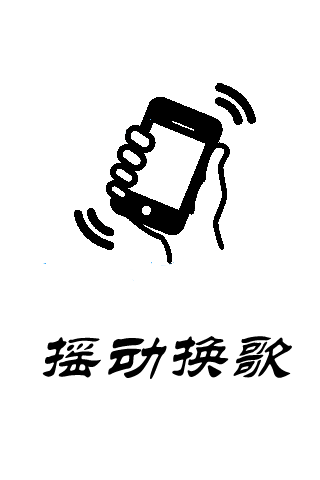
<style>
.page{position:relative;width:320px;height:480px;background:#ffffff}
.page>*{position:absolute;margin:0}
.t1{font:64px "STLiti";color:#000000;font-style:italic}
</style>
<div class="page">
<p class="t1" style="left:42px;top:336px;width:250px;height:43px">摇动换歌</p>
</div>
